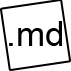
<style>
.page{position:relative;width:71px;height:71px;background:#ffffff}
.page>*{position:absolute;margin:0}
.t1{font:60px "ArialMT";color:#000000}
</style>
<div class="page">
<p class="t1" style="left:9px;top:21px;width:53px;height:25px">.md</p>
</div>
